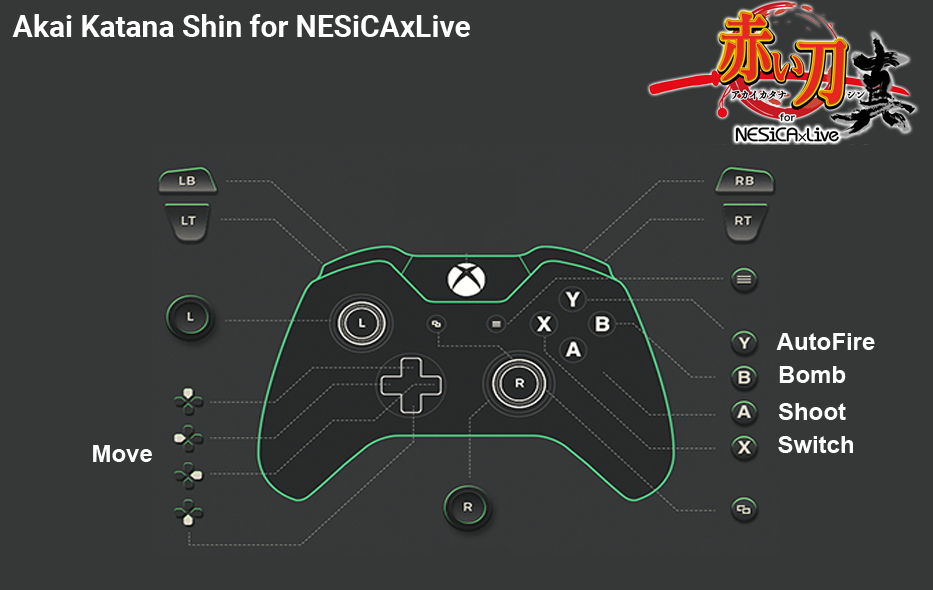
<style>
.page{position:relative;width:933px;height:590px;background:#363838}
.page>*{position:absolute;margin:0}
.t1{font:30px "Roboto-Bold";color:#ffffff}
.t2{font:24px "Arial-BoldMT";color:#fefefe}
</style>
<div class="page">
<p class="t1" style="left:12px;top:14px;width:458px;height:23px">Akai Katana Shin for NESiCAxLive</p>
<p class="t2" style="left:776px;top:333px;width:99px;height:17px">AutoFire</p>
<p class="t2" style="left:779px;top:366px;width:67px;height:17px">Bomb</p>
<p class="t2" style="left:778px;top:403px;width:68px;height:17px">Shoot</p>
<p class="t2" style="left:778px;top:436px;width:75px;height:17px">Switch</p>
<p class="t2" style="left:93px;top:445px;width:59px;height:17px">Move</p>
</div>
